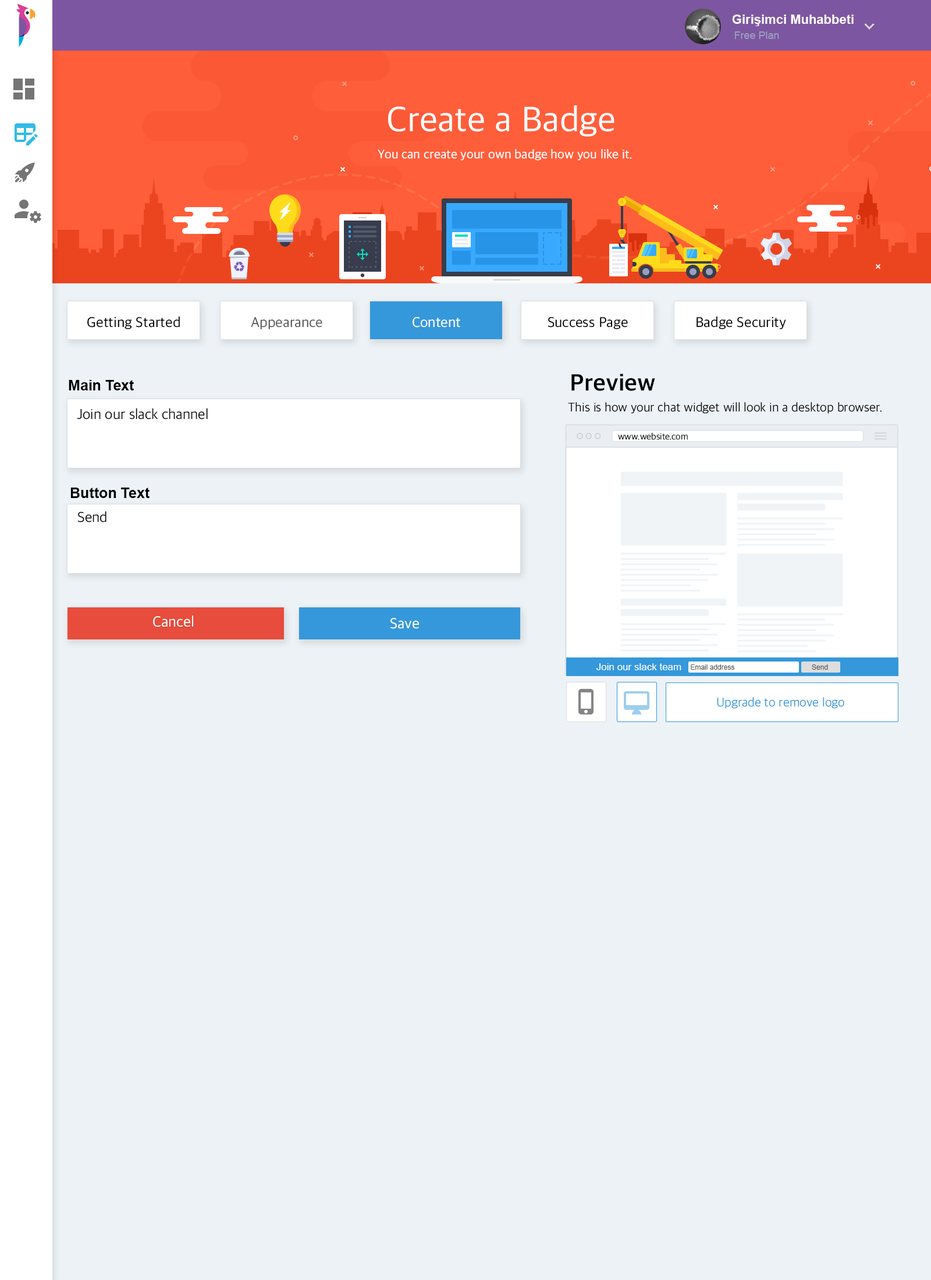
<style>
.page{position:relative;width:931px;height:1280px;background:#edf2f6}
.page>*{position:absolute;margin:0}
.t1{font:12.8px "Arial-BoldMT";color:#ffffff}
.t2{font:10.5px "ArialMT";color:#9a9fbf}
.t3{font:36.1px "AppleSDGothicNeo-Regular";color:#ffffff}
.t4{font:12.8px "AppleSDGothicNeo-Regular";color:#ffffff}
.t5{font:14.6px "AppleSDGothicNeo-Regular";color:#000000}
.t6{font:14.6px "AppleSDGothicNeo-Regular";color:#585858}
.t7{font:14.6px "AppleSDGothicNeo-Regular";color:#ffffff}
.t8{font:23.9px "AppleSDGothicNeo-Bold";color:#000000}
.t9{font:14.6px "Arial-BoldMT";color:#000000}
.t10{font:14.6px "AppleSDGothicNeo-Light";color:#000000}
.t11{font:12.8px "AppleSDGothicNeo-Light";color:#000000}
.t12{font:9.3px "AppleSDGothicNeo-Light";color:#000000}
.t13{font:15.1px "AppleSDGothicNeo-Regular";color:#ffffff}
.t14{font:9.9px "ArialMT";color:#ffffff}
.t15{font:7px "ArialMT";color:#585858}
.t16{font:12.8px "AppleSDGothicNeo-Light";color:#3498db}
</style>
<div class="page">
<p class="t1" style="left:732px;top:15px;width:122px;height:11px">Girişimci Muhabbeti</p>
<p class="t2" style="left:735px;top:31px;width:44px;height:8px">Free Plan</p>
<p class="t3" style="left:388px;top:105px;width:227px;height:32px">Create a Badge</p>
<p class="t4" style="left:378px;top:149px;width:254px;height:12px">You can create your own badge how you like it.</p>
<p class="t5" style="left:87px;top:317px;width:93px;height:12px">Getting Started</p>
<p class="t6" style="left:251px;top:317px;width:71px;height:12px">Appearance</p>
<p class="t7" style="left:413px;top:317px;width:47px;height:11px">Content</p>
<p class="t5" style="left:548px;top:317px;width:80px;height:12px">Success Page</p>
<p class="t5" style="left:697px;top:317px;width:89px;height:12px">Badge Security</p>
<p class="t8" style="left:572px;top:374px;width:83px;height:17px">Preview</p>
<p class="t9" style="left:69px;top:380px;width:65px;height:11px">Main Text</p>
<p class="t10" style="left:77px;top:408px;width:131px;height:12px">Join our slack channel</p>
<p class="t11" style="left:568px;top:402px;width:314px;height:12px">This is how your chat widget will look in a desktop browser.</p>
<p class="t12" style="left:618px;top:432px;width:70px;height:8px">www.website.com</p>
<p class="t9" style="left:70px;top:488px;width:80px;height:10px">Button Text</p>
<p class="t10" style="left:77px;top:511px;width:30px;height:12px">Send</p>
<p class="t13" style="left:153px;top:616px;width:40px;height:11px">Cancel</p>
<p class="t13" style="left:391px;top:618px;width:28px;height:11px">Save</p>
<p class="t14" style="left:597px;top:664px;width:85px;height:6px">Join our slack team</p>
<p class="t15" style="left:691px;top:665px;width:44px;height:5px">Email address</p>
<p class="t15" style="left:812px;top:665px;width:16px;height:5px">Send</p>
<p class="t16" style="left:717px;top:697px;width:128px;height:12px">Upgrade to remove logo</p>
</div>
